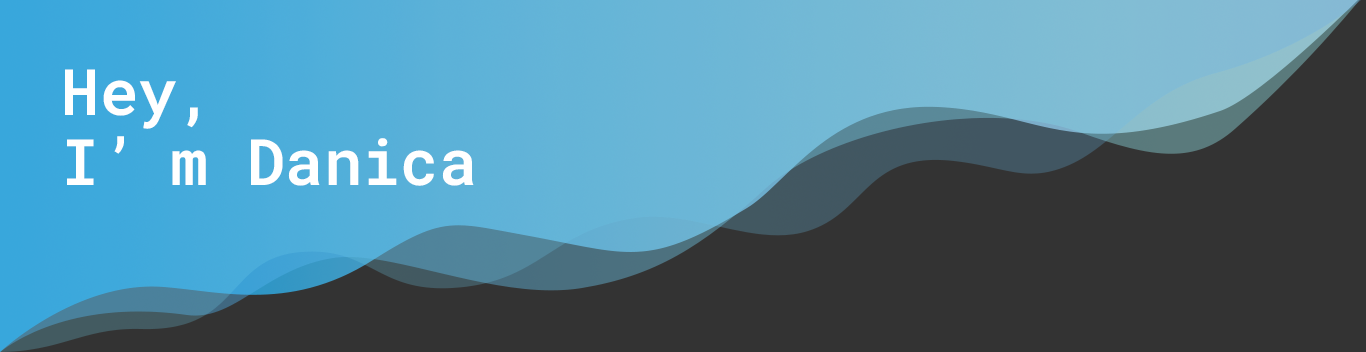
<style>
.page{position:relative;width:1366px;height:352px;background:#333333}
.page>*{position:absolute;margin:0}
.t1{font:64px/70px "RobotoMono-SemiBold";color:#ffffff}
</style>
<div class="page">
<p class="t1" style="left:65px;top:69px;width:409px;height:117px">Hey,<br>I’m Danica</p>
</div>
